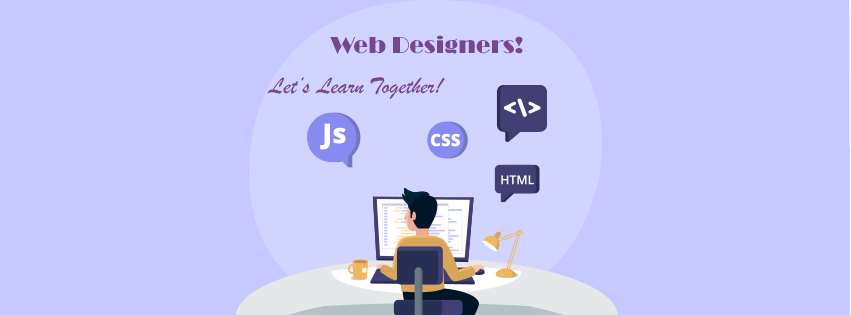
<style>
.page{position:relative;width:851px;height:315px;background:#c6c9ff}
.page>*{position:absolute;margin:0}
.t1{font:24px "Broadway";color:#774690}
.t2{font:24px "BrushScriptMT";color:#774690}
</style>
<div class="page">
<p class="t1" style="left:330px;top:35px;width:193px;height:20px">Web Designers!</p>
<p class="t2" style="left:267px;top:77px;width:178px;height:22px">Let’s Learn Together!</p>
</div>
